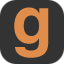
<style>
.page{position:relative;width:64px;height:64px;background:#333333}
.page>*{position:absolute;margin:0}
.t1{font:66px "Helvetica-Bold";letter-spacing:-0.025em;color:#e08d4b}
</style>
<div class="page">
<p class="t1" style="left:14px;top:7px;width:35px;height:51px">g</p>
</div>
